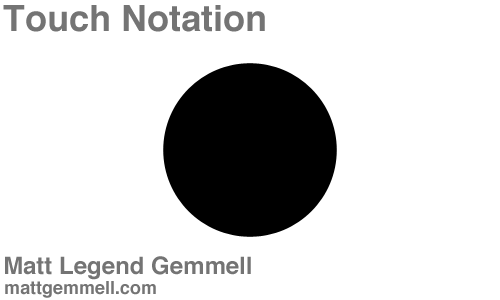
<style>
.page{position:relative;width:500px;height:300px;background:#ffffff}
.page>*{position:absolute;margin:0}
.t1{font:36px "Helvetica-Bold";color:#747474}
.t2{font:24px "Helvetica-Bold";color:#747474}
.t3{font:18px "Helvetica-Bold";color:#747474}
</style>
<div class="page">
<p class="t1" style="left:3px;top:5px;width:262px;height:27px">Touch Notation</p>
<p class="t2" style="left:5px;top:256px;width:246px;height:24px">Matt Legend Gemmell</p>
<p class="t3" style="left:5px;top:281px;width:151px;height:17px">mattgemmell.com</p>
</div>
